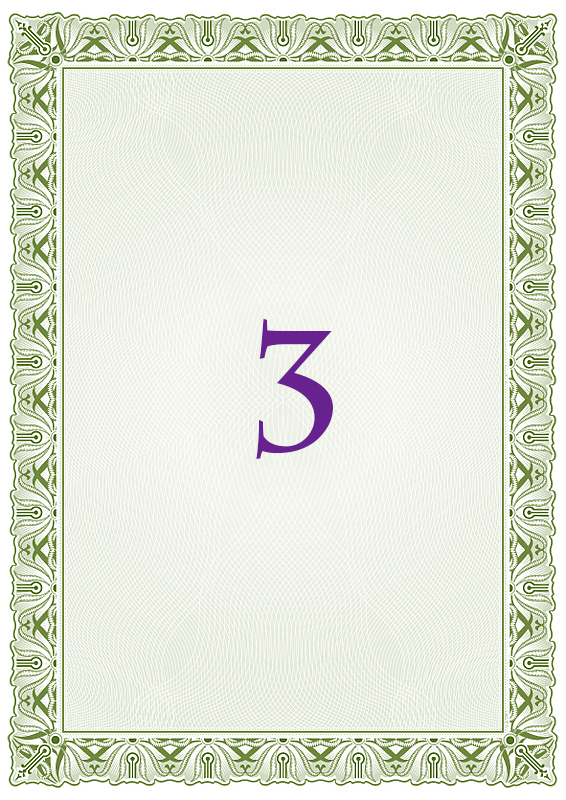
<style>
.page{position:relative;width:566px;height:800px}
.page>*{position:absolute;margin:0}
.t1{font:170px "CharlemagneStd-Bold";color:#672290}
</style>
<div class="page">
<p class="t1" style="left:256px;top:318px;width:77px;height:141px">3</p>
</div>
